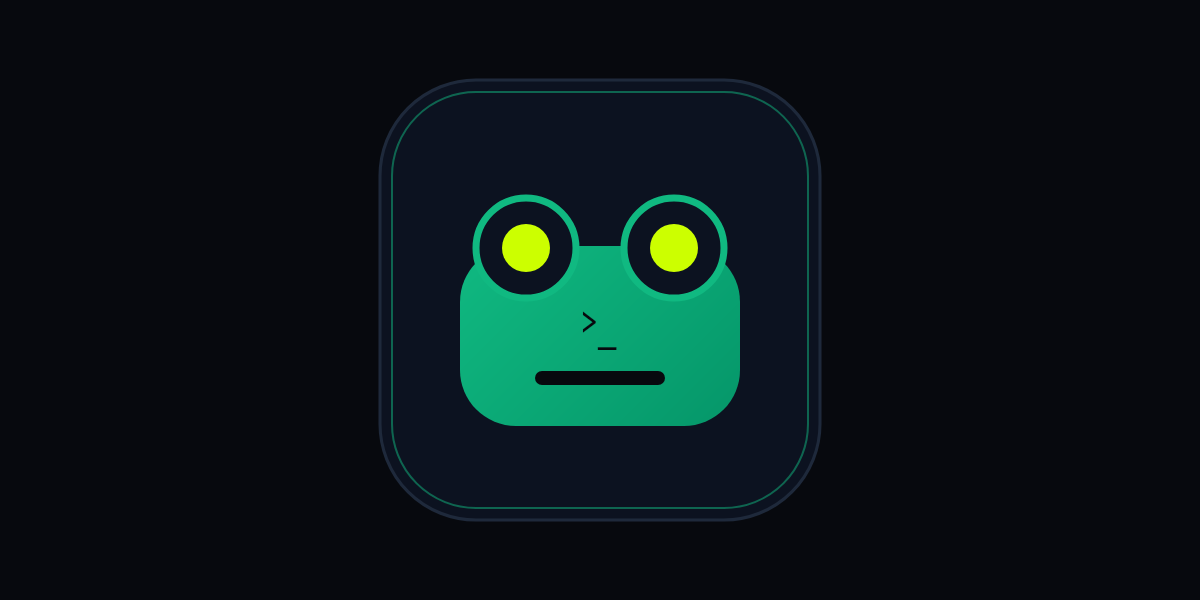
<style>
.page{position:relative;width:1200px;height:600px;background:#07090e}
.page>*{position:absolute;margin:0}
.t1{font:52px "sans-serif-Regular";font-weight:bold}
</style>
<div class="page">
<p class="t1" style="left:580px;top:298px;width:40px;height:65px">&gt;_</p>
</div>
